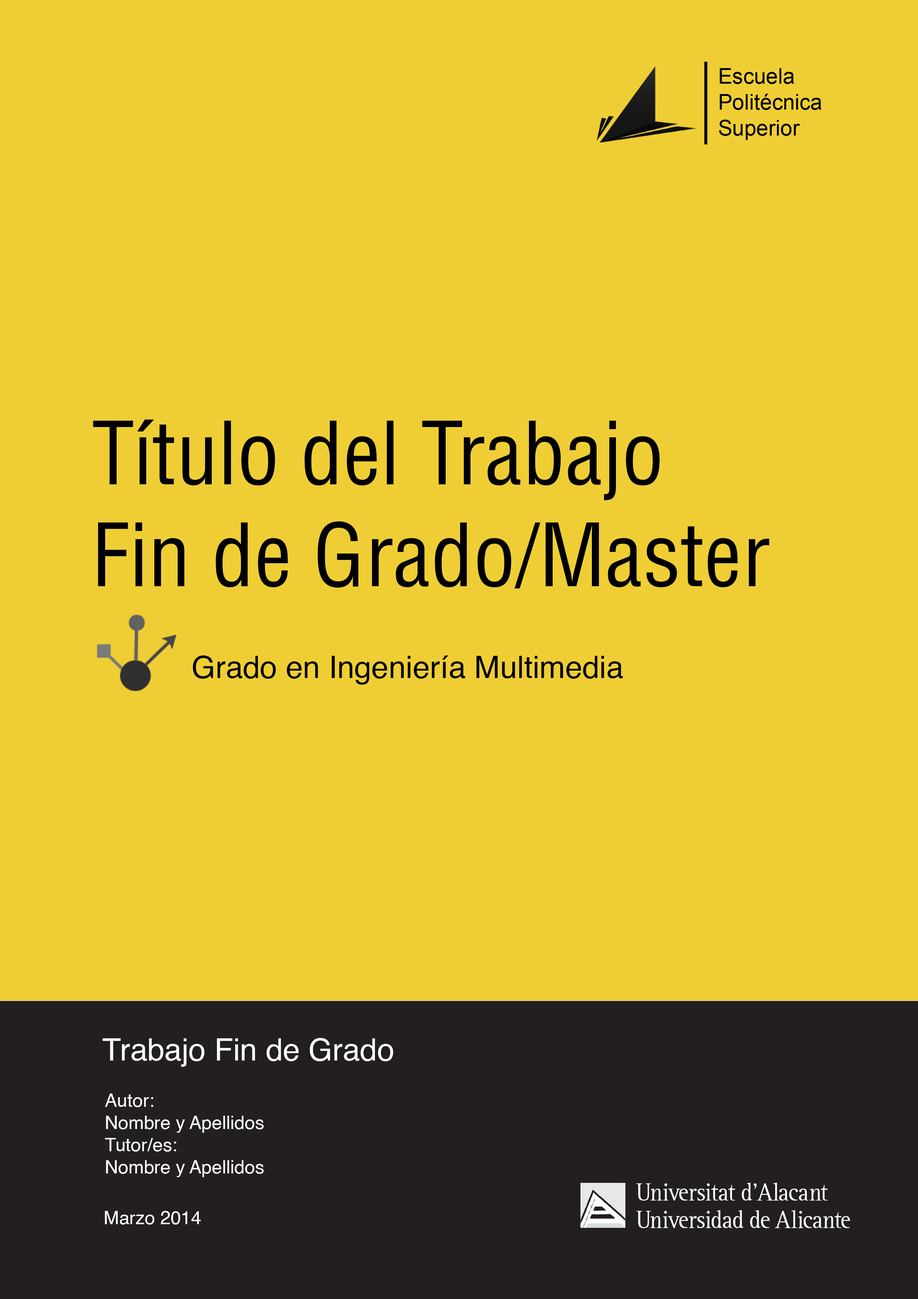
<style>
.page{position:relative;width:918px;height:1299px;background:#efce35}
.page>*{position:absolute;margin:0}
.t1{font:84.8px "HelveticaLTStd-Cond";color:#000000}
.t2{font:30.9px "Helvetica";color:#000000}
.t3{font:30.9px "Helvetica";color:#ffffff}
.t4{font:18.5px "Helvetica";color:#ffffff}
</style>
<div class="page">
<p class="t1" style="left:93px;top:419px;width:677px;height:170px">Título del Trabajo<br>Fin de Grado/Master</p>
<p class="t2" style="left:193px;top:655px;width:430px;height:30px">Grado en Ingeniería Multimedia</p>
<p class="t3" style="left:103px;top:1038px;width:290px;height:29px">Trabajo Fin de Grado</p>
<p class="t4" style="left:105px;top:1093px;width:159px;height:84px">Autor:<br>Nombre y Apellidos<br>Tutor/es:<br>Nombre y Apellidos</p>
<p class="t4" style="left:105px;top:1211px;width:96px;height:13px">Marzo 2014</p>
</div>
